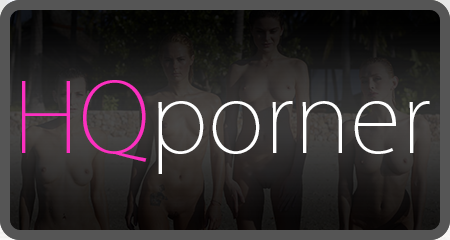
<style>
.page{position:relative;width:450px;height:240px}
.page>*{position:absolute;margin:0}
.t1{font:95px "KozGoPr6N-ExtraLight";color:#ffffff}
.t2{font:95px "KozGoPr6N-ExtraLight";color:#fc2fc0}
</style>
<div class="page">
<p class="t1" style="left:22px;top:80px;width:408px;height:94px"><span class="t2">HQ</span>porner</p>
</div>
